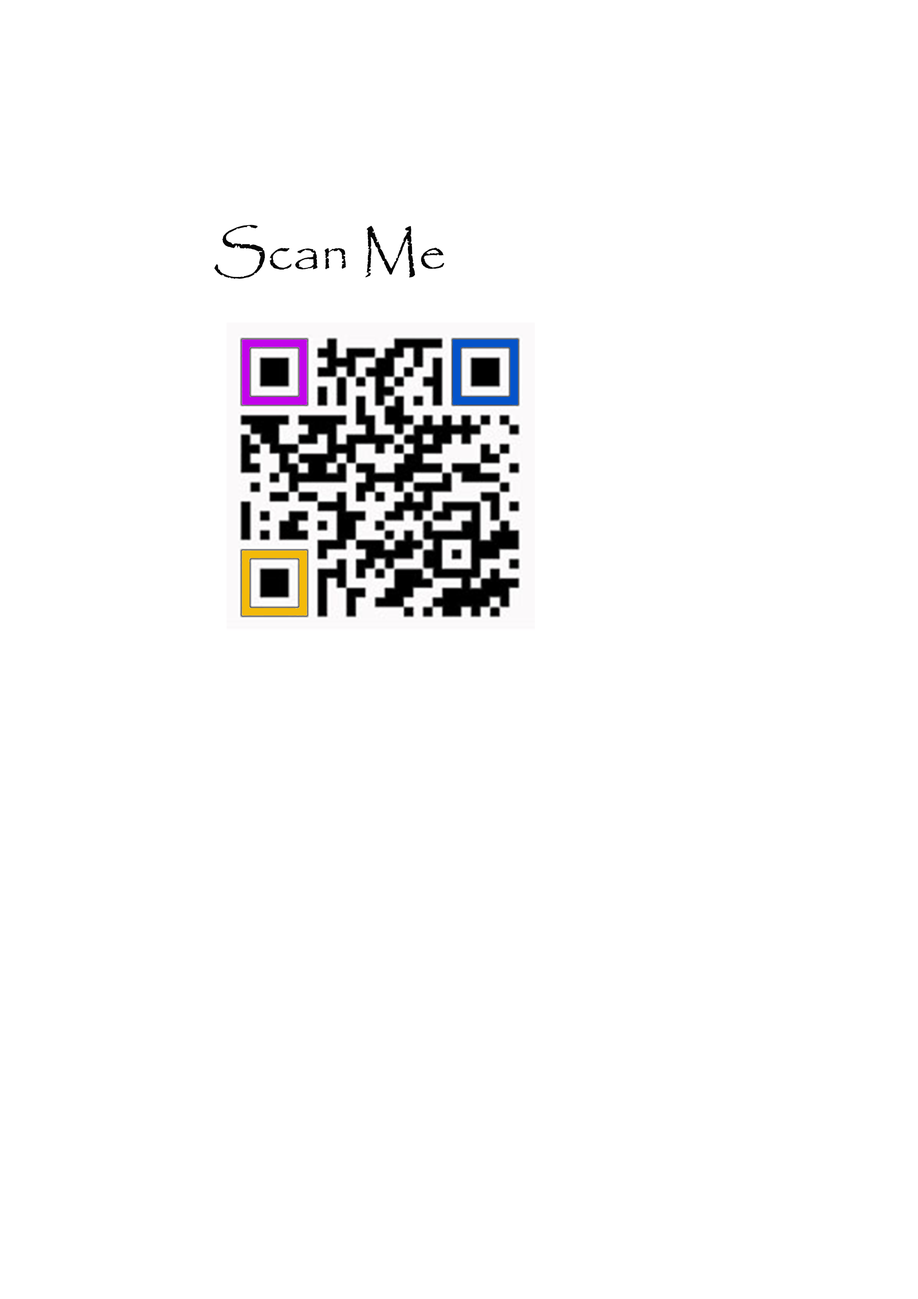
<style>
.page{position:relative;width:918px;height:1299px;background:#ffffff}
.page>*{position:absolute;margin:0}
.t1{font:55.5px "Papyrus-Regular";color:#070707}
</style>
<div class="page">
<p class="t1" style="left:214px;top:225px;width:230px;height:54px">Scan Me</p>
</div>
